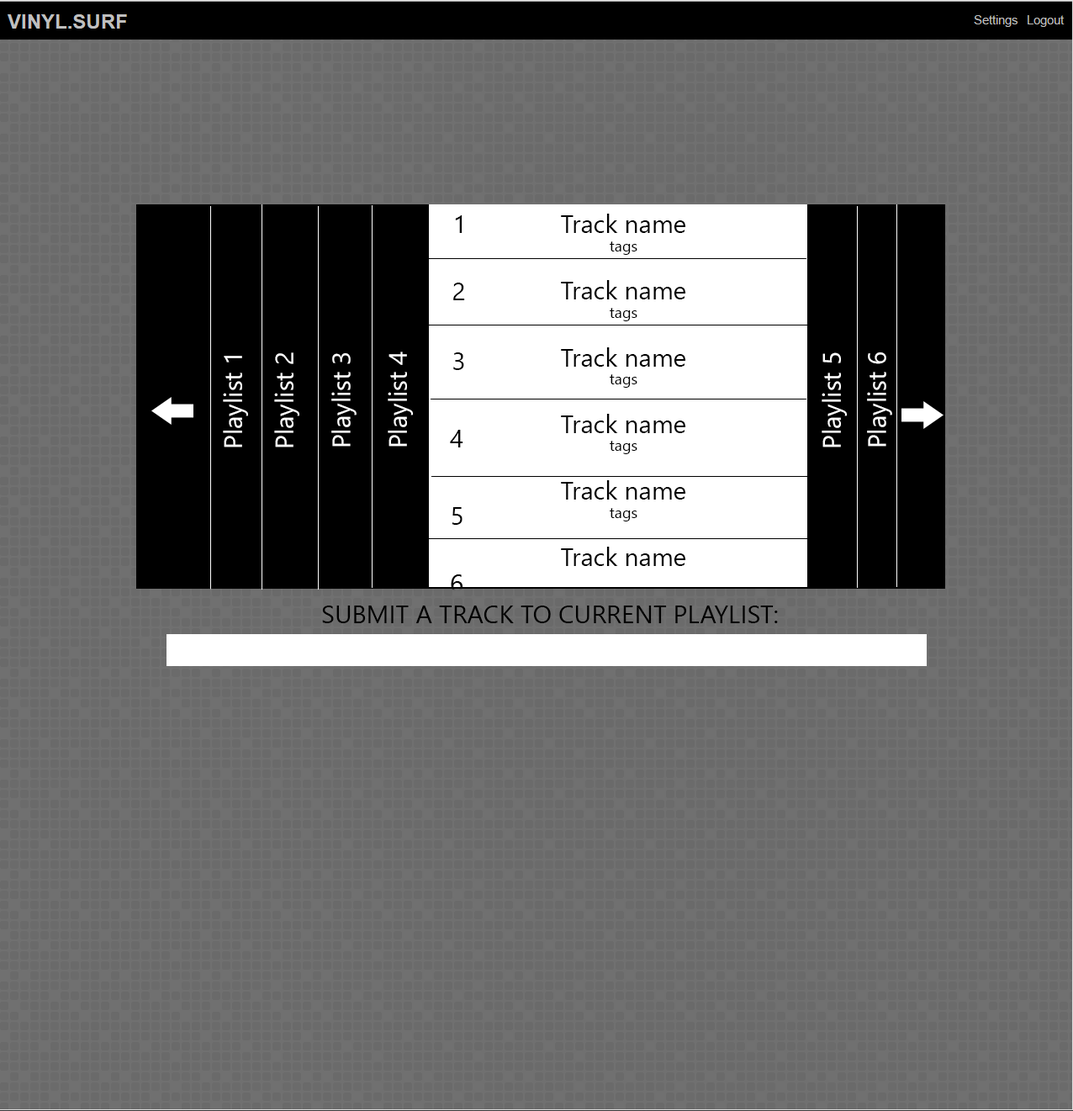
<style>
.page{position:relative;width:1073px;height:1111px}
.page>*{position:absolute;margin:0}
.t1{font:25.2px "NirmalaUI";color:#000000}
.t2{font:15.1px "NirmalaUI";color:#000000}
.t3{font:25.2px "NirmalaUI";color:#ffffff}
</style>
<div class="page">
<p class="t1" style="left:455px;top:215px;width:8px;height:18px">1</p>
<p class="t1" style="left:561px;top:214px;width:124px;height:352px;text-align:center">Track name<br><span class="t2">tags<br><br></span>Track name<br><span class="t2">tags<br><br></span>Track name<br><span class="t2">tags<br><br></span>Track name<br><span class="t2">tags<br><br></span>Track name<br><span class="t2">tags<br><br></span>Track name<br><span class="t2">tags</span></p>
<p class="t1" style="left:453px;top:283px;width:12px;height:17px">2</p>
<p class="t3" style="left:274px;top:352px;width:25px;height:95px;rotate:-90deg">Playlist 2</p>
<p class="t3" style="left:331px;top:353px;width:26px;height:94px;rotate:-90deg">Playlist 3</p>
<p class="t3" style="left:388px;top:352px;width:25px;height:95px;rotate:-90deg">Playlist 4</p>
<p class="t1" style="left:453px;top:352px;width:11px;height:18px">3</p>
<p class="t3" style="left:822px;top:352px;width:25px;height:95px;rotate:-90deg">Playlist 5</p>
<p class="t3" style="left:867px;top:352px;width:25px;height:95px;rotate:-90deg">Playlist 6</p>
<p class="t3" style="left:223px;top:356px;width:25px;height:91px;rotate:-90deg">Playlist 1</p>
<p class="t1" style="left:450px;top:430px;width:13px;height:17px">4</p>
<p class="t1" style="left:452px;top:507px;width:11px;height:18px">5</p>
<p class="t1" style="left:322px;top:606px;width:456px;height:17px">SUBMIT A TRACK TO CURRENT PLAYLIST:</p>
</div>
